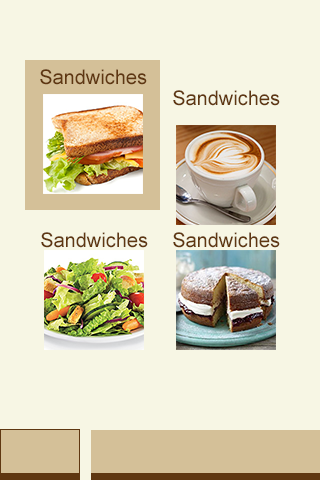
<style>
.page{position:relative;width:320px;height:480px;background:#f7f6e4}
.page>*{position:absolute;margin:0}
.t1{font:20px "ArialMT";color:#5f3711}
</style>
<div class="page">
<p class="t1" style="left:40px;top:69px;width:107px;height:16px">Sandwiches</p>
<p class="t1" style="left:173px;top:90px;width:107px;height:16px">Sandwiches</p>
<p class="t1" style="left:41px;top:232px;width:107px;height:16px">Sandwiches</p>
<p class="t1" style="left:173px;top:232px;width:107px;height:16px">Sandwiches</p>
</div>
